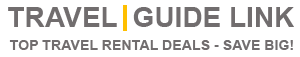
<style>
.page{position:relative;width:300px;height:57px;background:#ffffff}
.page>*{position:absolute;margin:0}
.t1{font:28px "Arial-BoldMT";color:#716d6e}
.t2{font:14.2px "Arial-BoldMT";color:#716d6e}
</style>
<div class="page">
<p class="t1" style="left:8px;top:7px;width:286px;height:20px">TRAVEL  GUIDE LINK</p>
<p class="t2" style="left:9px;top:40px;width:284px;height:10px">TOP TRAVEL RENTAL DEALS - SAVE BIG!</p>
</div>
